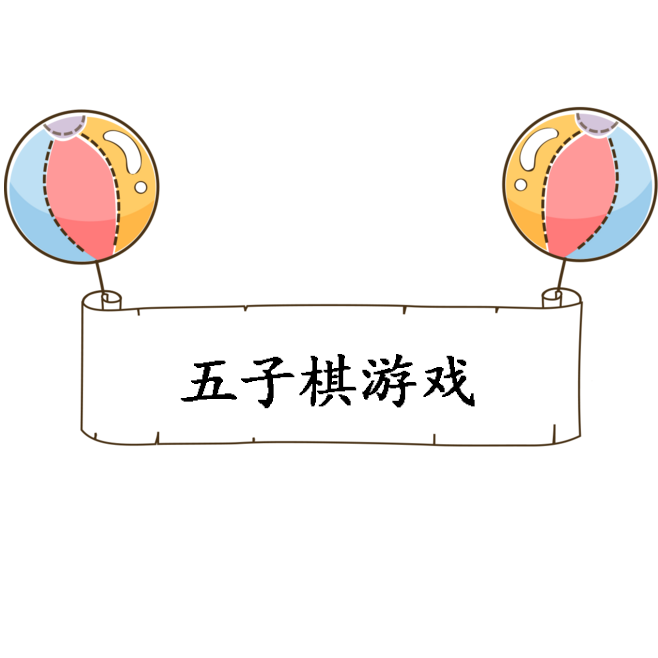
<style>
.page{position:relative;width:658px;height:658px;background:#ffffff}
.page>*{position:absolute;margin:0}
.t1{font:60px "¿¬Ìå";color:#000000;text-transform:uppercase;font-weight:bold}
</style>
<div class="page">
<p class="t1" style="left:180px;top:354px;width:295px;height:55px">五子棋游戏</p>
</div>
